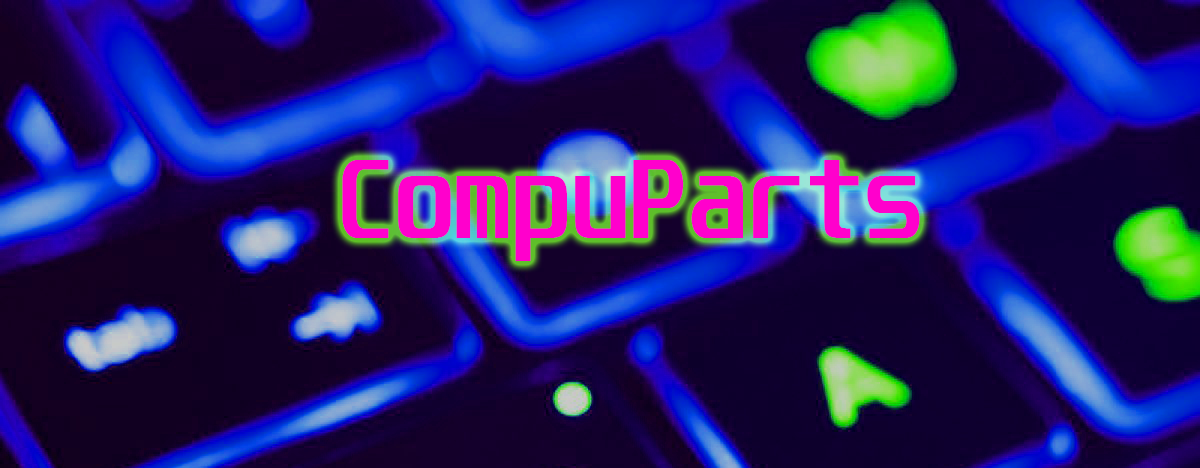
<style>
.page{position:relative;width:1200px;height:468px}
.page>*{position:absolute;margin:0}
.t1{font:96px "Unispace-Bold";color:#ff00cc}
</style>
<div class="page">
<p class="t1" style="left:342px;top:160px;width:578px;height:101px">CompuParts</p>
</div>
